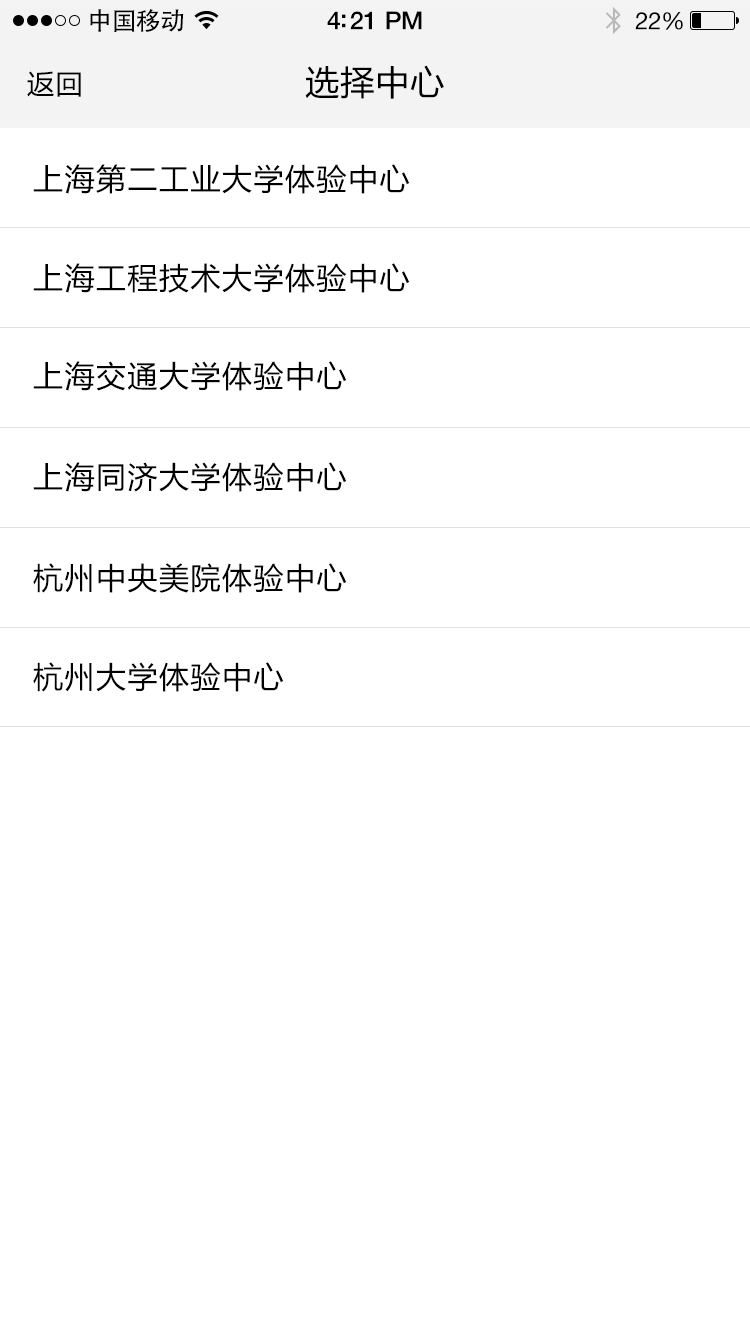
<style>
.page{position:relative;width:750px;height:1334px;background:#ffffff}
.page>*{position:absolute;margin:0}
.t1{font:25px "AdobeHeitiStd-Regular";letter-spacing:-0.025em;color:#000000}
.t2{font:25px "HelveticaNeue-Medium";letter-spacing:-0.02em;color:#000000}
.t3{font:24px "HelveticaNeue";letter-spacing:-0.02em;color:#000000}
.t4{font:34px "MicrosoftYaHei";letter-spacing:0.03em;color:#000000}
.t5{font:27px "MicrosoftYaHei";letter-spacing:0.05em;color:#000000}
.t6{font:30px "MicrosoftYaHei";letter-spacing:0.05em;color:#000000}
</style>
<div class="page">
<p class="t1" style="left:90px;top:9px;width:94px;height:23px">中国移动</p>
<p class="t2" style="left:327px;top:11px;width:95px;height:19px">4:21 PM</p>
<p class="t3" style="left:635px;top:12px;width:48px;height:18px">22%</p>
<p class="t4" style="left:305px;top:65px;width:139px;height:34px">选择中心</p>
<p class="t5" style="left:27px;top:71px;width:54px;height:26px">返回</p>
<p class="t6" style="left:33px;top:164px;width:377px;height:30px">上海第二工业大学体验中心</p>
<p class="t6" style="left:33px;top:263px;width:377px;height:30px">上海工程技术大学体验中心</p>
<p class="t6" style="left:33px;top:361px;width:314px;height:30px">上海交通大学体验中心</p>
<p class="t6" style="left:33px;top:462px;width:314px;height:30px">上海同济大学体验中心</p>
<p class="t6" style="left:33px;top:563px;width:314px;height:30px">杭州中央美院体验中心</p>
<p class="t6" style="left:33px;top:662px;width:251px;height:30px">杭州大学体验中心</p>
</div>
